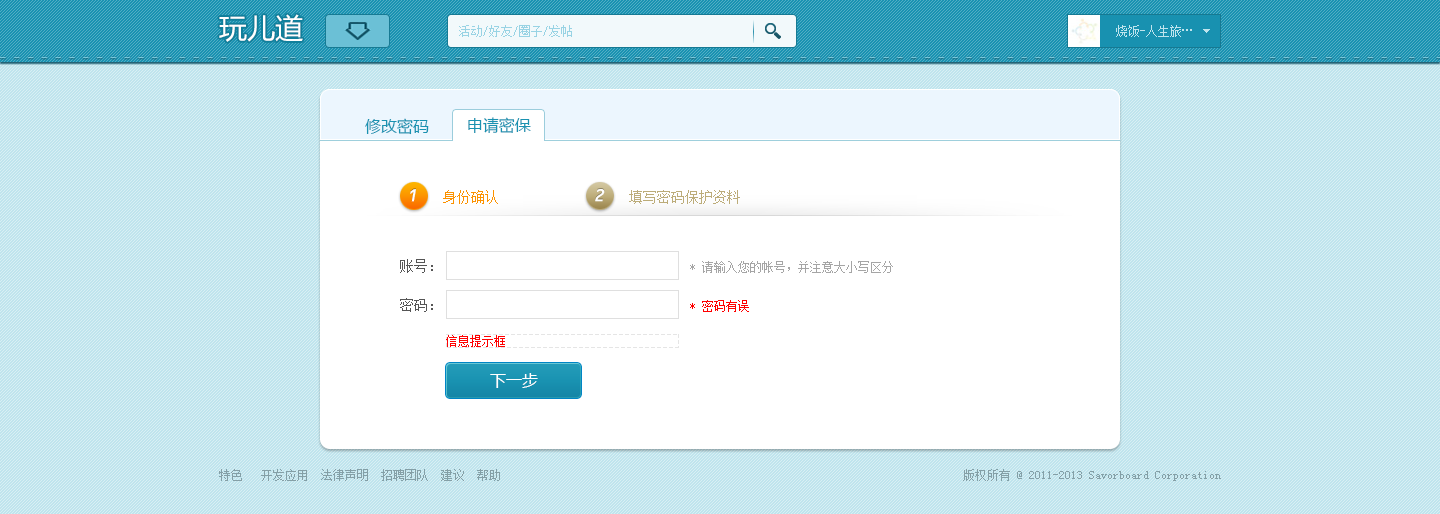
<style>
.page{position:relative;width:1440px;height:514px;background:#bfe4ed}
.page>*{position:absolute;margin:0}
.t1{font:28px "MicrosoftYaHei";color:#ffffff}
.t2{font:12px "SimSun";color:#98d3e4}
.t3{font:16px "MicrosoftYaHei";color:#1992b1}
.t4{font:19px "OCRB10PitchBT-Regular";color:#ffffff;font-style:italic}
.t5{font:14px "SimSun";color:#fc9200}
.t6{font:14px "SimSun";color:#bcac79}
.t7{font:14px "SimSun";color:#555555}
.t8{font:12px "SimSun";color:#a5a5a5}
.t9{font:12px "SimSun";color:#ff0000}
.t10{font:12px "SimSun";color:#ff0101}
.t11{font:16px "MicrosoftYaHei";color:#ffffff}
.t12{font:12px "SimSun";color:#849fa6}
</style>
<div class="page">
<p class="t1" style="left:219px;top:14px;width:84px;height:28px">玩儿道</p>
<p class="t2" style="left:459px;top:25px;width:113px;height:12px">活动/好友/圈子/发帖</p>
<p class="t3" style="left:365px;top:118px;width:64px;height:17px">修改密码</p>
<p class="t3" style="left:468px;top:117px;width:63px;height:16px">申请密保</p>
<p class="t4" style="left:410px;top:189px;width:6px;height:13px">1</p>
<p class="t5" style="left:443px;top:190px;width:55px;height:14px">身份确认</p>
<p class="t4" style="left:595px;top:189px;width:10px;height:13px">2</p>
<p class="t6" style="left:629px;top:190px;width:111px;height:14px">填写密码保护资料</p>
<p class="t7" style="left:400px;top:259px;width:33px;height:14px">账号：</p>
<p class="t8" style="left:690px;top:261px;width:203px;height:12px">* 请输入您的帐号，并注意大小写区分</p>
<p class="t7" style="left:400px;top:298px;width:33px;height:14px">密码：</p>
<p class="t9" style="left:690px;top:300px;width:59px;height:12px">* 密码有误</p>
<p class="t10" style="left:446px;top:335px;width:59px;height:12px">信息提示框</p>
<p class="t11" style="left:490px;top:373px;width:48px;height:15px">下一步</p>
<p class="t12" style="left:219px;top:469px;width:281px;height:12px">特色   开发应用  法律声明  招聘团队  建议  帮助</p>
<p class="t12" style="left:963px;top:469px;width:258px;height:12px">版权所有 @ 2011-2013 Savorboard Corporation</p>
</div>
